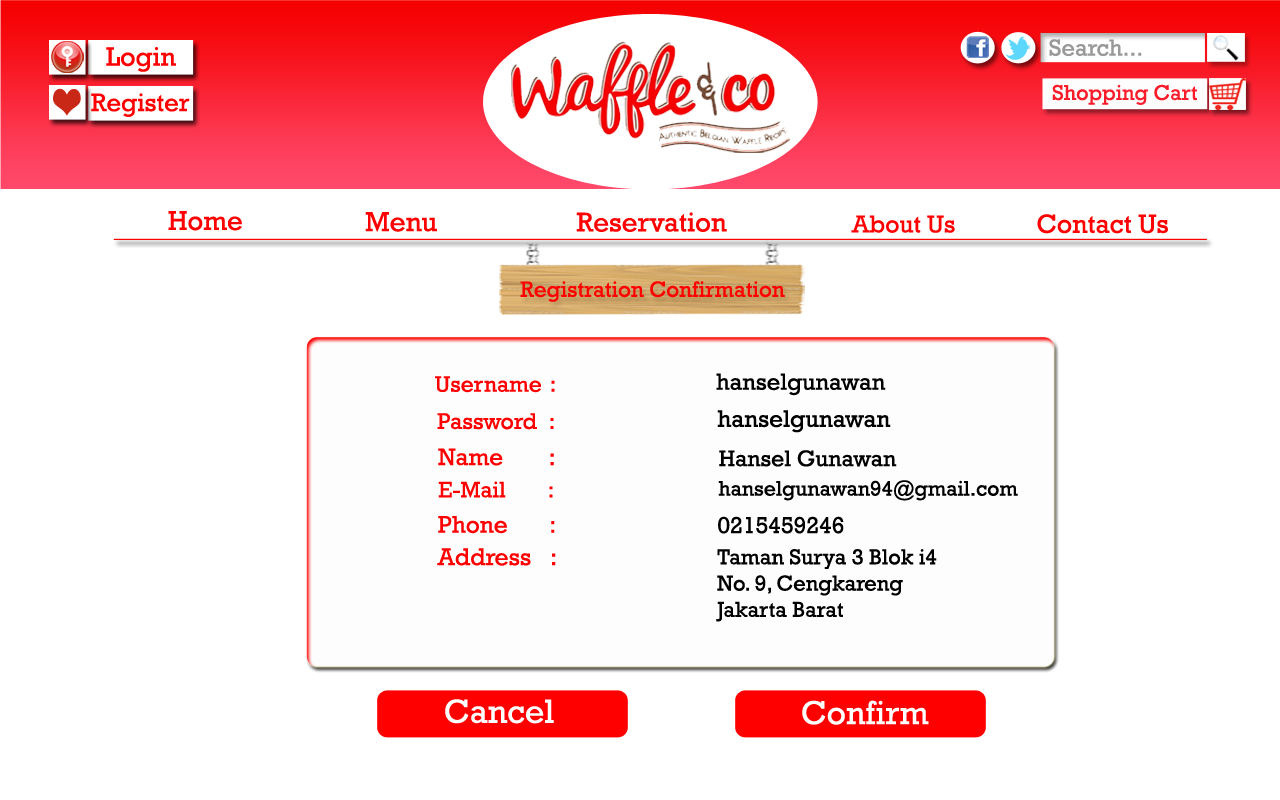
<style>
.page{position:relative;width:1280px;height:800px;background:#ffffff}
.page>*{position:absolute;margin:0}
.t1{font:27.5px "Rockwell";color:#fe0000}
.t2{font:28px "Rockwell";color:#fe0000}
.t3{font:27.6px "Rockwell";color:#fe0000}
.t4{font:24.9px "Rockwell";color:#fe0000}
.t5{font:26.7px "Rockwell";color:#fe0000}
.t6{font:22.4px "Rockwell";color:#fe0000}
.t7{font:22.8px "Rockwell";color:#fe0000}
.t8{font:23.7px "Rockwell";color:#000000}
.t9{font:23.1px "Rockwell";color:#fe0000}
.t10{font:24.2px "Rockwell";color:#000000}
.t11{font:24.2px "Rockwell";color:#fe0000}
.t12{font:23.1px "Rockwell";color:#000000}
.t13{font:22.7px "Rockwell";color:#fe0000}
.t14{font:21.3px "Rockwell";color:#000000}
.t15{font:24.4px "Rockwell";color:#fe0000}
.t16{font:23.4px "Rockwell";color:#000000}
.t17{font:24.6px "Rockwell";color:#fe0000}
.t18{font:21.9px "Rockwell";color:#000000}
.t19{font:34px "Rockwell";color:#ffffff}
.t20{font:33.8px "Rockwell";color:#ffffff}
</style>
<div class="page">
<p class="t1" style="left:168px;top:211px;width:74px;height:20px">Home</p>
<p class="t2" style="left:365px;top:212px;width:72px;height:20px">Menu</p>
<p class="t3" style="left:576px;top:212px;width:151px;height:20px">Reservation</p>
<p class="t4" style="left:851px;top:215px;width:104px;height:18px">About Us</p>
<p class="t5" style="left:1037px;top:214px;width:131px;height:20px">Contact Us</p>
<p class="t6" style="left:520px;top:281px;width:265px;height:21px">Registration Confirmation</p>
<p class="t7" style="left:435px;top:376px;width:120px;height:17px">Username :</p>
<p class="t8" style="left:716px;top:373px;width:170px;height:23px">hanselgunawan</p>
<p class="t9" style="left:437px;top:413px;width:117px;height:17px">Password   :</p>
<p class="t10" style="left:717px;top:410px;width:174px;height:23px">hanselgunawan</p>
<p class="t11" style="left:438px;top:448px;width:116px;height:18px">Name    :</p>
<p class="t12" style="left:719px;top:450px;width:178px;height:17px">Hansel Gunawan</p>
<p class="t13" style="left:438px;top:481px;width:115px;height:17px">E-Mail    :</p>
<p class="t14" style="left:718px;top:480px;width:300px;height:21px">hanselgunawan94@gmail.com</p>
<p class="t15" style="left:438px;top:516px;width:117px;height:18px">Phone    :</p>
<p class="t16" style="left:718px;top:516px;width:126px;height:18px">0215459246</p>
<p class="t17" style="left:437px;top:548px;width:119px;height:18px">Address  :</p>
<p class="t18" style="left:716px;top:549px;width:221px;height:73px">Taman Surya 3 Blok i4<br>No. 9, Cengkareng<br>Jakarta Barat</p>
<p class="t19" style="left:445px;top:699px;width:109px;height:25px">Cancel</p>
<p class="t20" style="left:802px;top:700px;width:127px;height:25px">Confirm</p>
</div>
